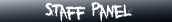
<style>
.page{position:relative;width:172px;height:22px}
.page>*{position:absolute;margin:0}
.t1{font:25px "YouMurdererBB";color:#ffffff}
</style>
<div class="page">
<p class="t1" style="left:44px;top:2px;width:88px;height:20px">Staff Panel</p>
</div>
